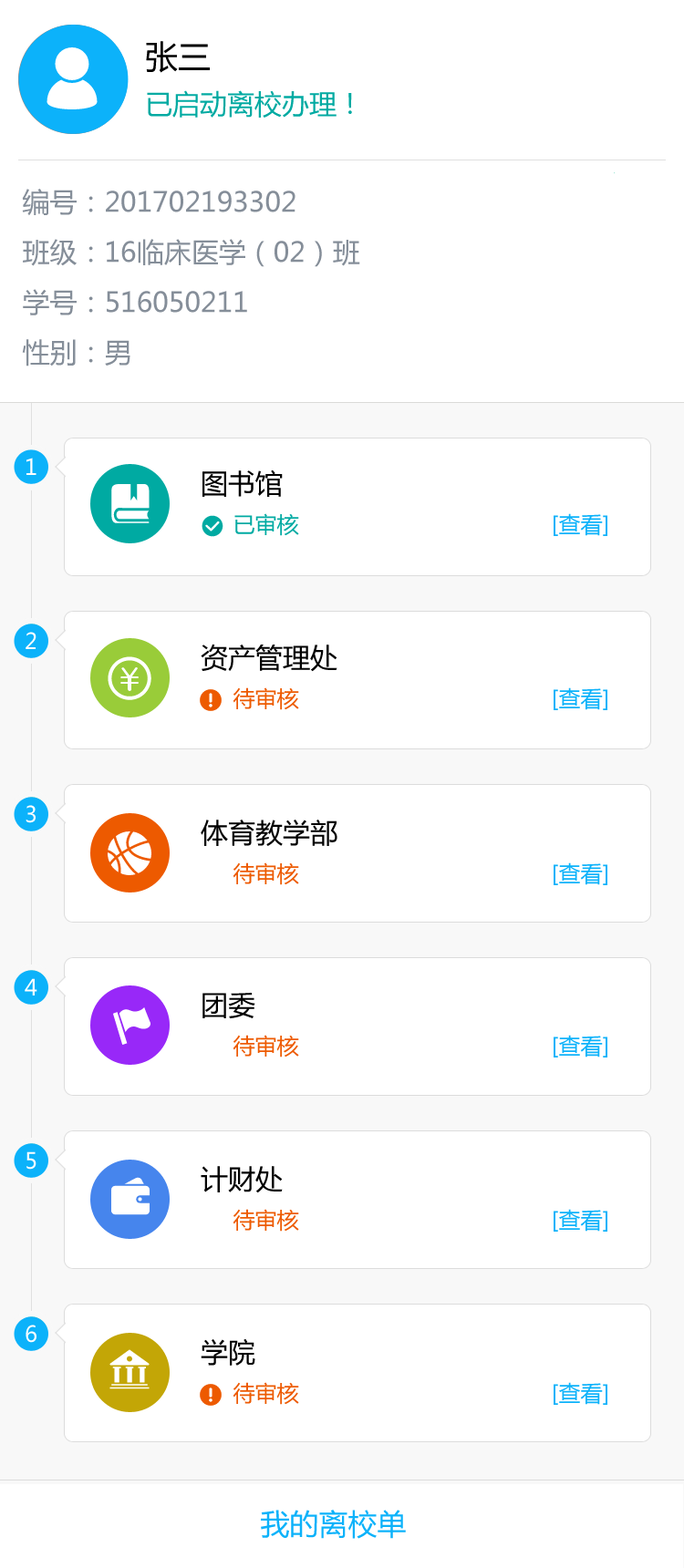
<style>
.page{position:relative;width:684px;height:1568px;background:#ffffff}
.page>*{position:absolute;margin:0}
.t1{font:27.3px/50.1px "MicrosoftYaHei";color:#00aaa2}
.t2{font:32.8px/50.1px "MicrosoftYaHei";color:#000000}
.t3{font:27.3px/50.1px "MicrosoftYaHei";color:#858e99}
.t4{font:21.9px "MicrosoftYaHei";color:#ffffff}
.t5{font:21.9px/43.8px "MicrosoftYaHei";color:#0cb2fa}
.t6{font:27.3px/43.8px "MicrosoftYaHei";color:#000000}
.t7{font:21.9px/43.8px "MicrosoftYaHei";color:#00aaa2}
.t8{font:21.9px/43.8px "MicrosoftYaHei";color:#ed5a00}
.t9{font:29.2px "MicrosoftYaHei";color:#0cb2fa}
</style>
<div class="page">
<p class="t1" style="left:146px;top:41px;width:206px;height:77px"><span class="t2">张三<br></span>已启动离校办理！</p>
<p class="t3" style="left:22px;top:189px;width:338px;height:177px">编号：201702193302<br>班级：16临床医学（02）班<br>学号：516050211<br>性别：男</p>
<p class="t4" style="left:26px;top:458px;width:10px;height:17px">1</p>
<p class="t5" style="left:202px;top:469px;width:405px;height:67px"><span class="t6">图书馆<br></span><span class="t7">     已审核                                      </span> [查看]</p>
<p class="t4" style="left:26px;top:632px;width:10px;height:17px">2</p>
<p class="t6" style="left:201px;top:644px;width:406px;height:66px">资产管理处<br><span class="t8">     待审核                                       </span><span class="t5">[查看]</span></p>
<p class="t4" style="left:26px;top:805px;width:10px;height:18px">3</p>
<p class="t6" style="left:201px;top:820px;width:406px;height:65px">体育教学部<br><span class="t8">     待审核                                       </span><span class="t5">[查看]</span></p>
<p class="t4" style="left:25px;top:978px;width:12px;height:17px">4</p>
<p class="t5" style="left:202px;top:993px;width:405px;height:64px"><span class="t6">团委<br></span><span class="t8">     待审核                                       </span>[查看]</p>
<p class="t4" style="left:26px;top:1151px;width:10px;height:19px">5</p>
<p class="t5" style="left:201px;top:1166px;width:406px;height:66px"><span class="t6">计财处<br></span><span class="t8">     待审核                                      </span> [查看]</p>
<p class="t4" style="left:26px;top:1325px;width:10px;height:18px">6</p>
<p class="t5" style="left:201px;top:1338px;width:406px;height:67px"><span class="t6">学院<br></span><span class="t8">     待审核                                       </span>[查看]</p>
<p class="t9" style="left:261px;top:1510px;width:145px;height:29px">我的离校单</p>
</div>
